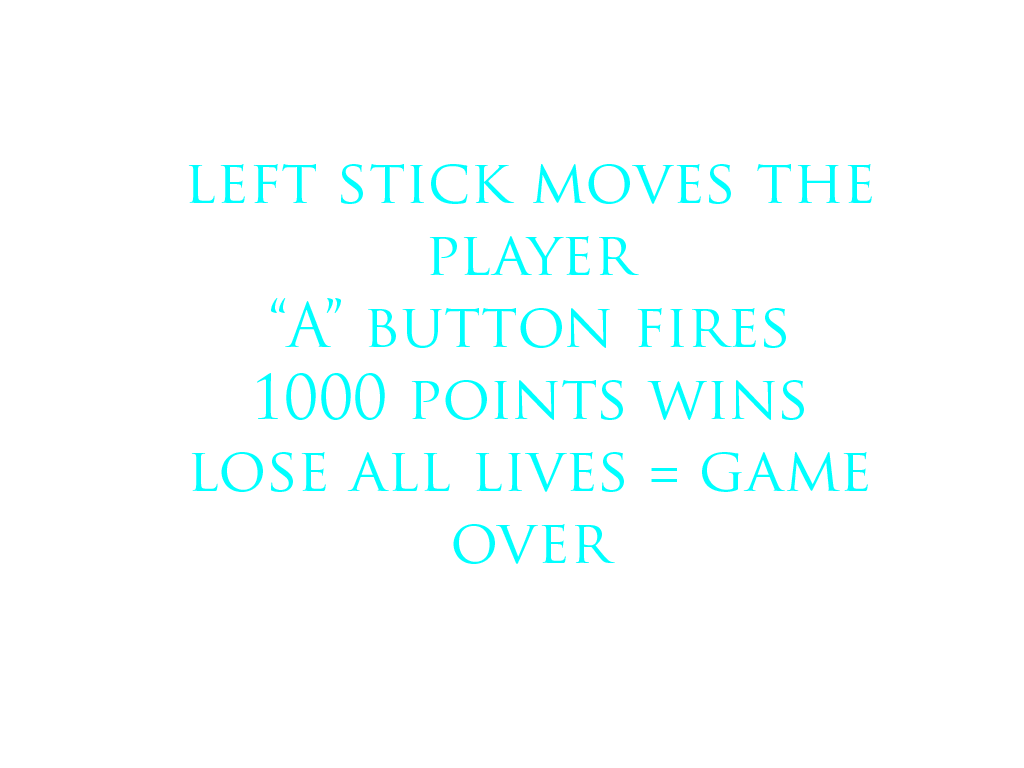
<style>
.page{position:relative;width:1024px;height:768px;background:#ffffff}
.page>*{position:absolute;margin:0}
.t1{font:60px "TrajanPro-Regular";color:#00ffff}
</style>
<div class="page">
<p class="t1" style="left:188px;top:164px;width:684px;height:400px;text-align:center">left stick moves the player <br>“A” button fires<br>1000 points wins<br>lose all lives = game over</p>
</div>
